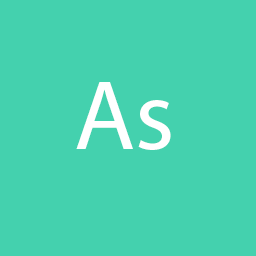
<style>
.page{position:relative;width:256px;height:256px;background:#44d1ae}
.page>*{position:absolute;margin:0}
.t1{font:100px "MyriadPro-Regular";color:#ffffff}
</style>
<div class="page">
<p class="t1" style="left:76px;top:82px;width:95px;height:68px">As</p>
</div>
